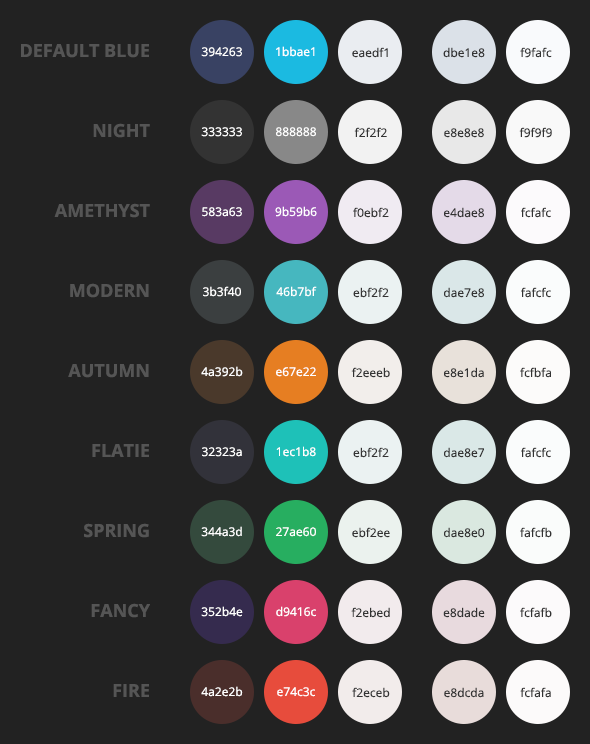
<style>
.page{position:relative;width:590px;height:744px;background:#222222}
.page>*{position:absolute;margin:0}
.t1{font:18px "OpenSans-Bold";color:#555555}
.t2{font:12px "OpenSans";color:#ffffff}
.t3{font:12px "OpenSans";color:#333333}
</style>
<div class="page">
<p class="t1" style="left:21px;top:44px;width:128px;height:14px">DEFAULT BLUE</p>
<p class="t2" style="left:201px;top:47px;width:41px;height:10px">394263</p>
<p class="t2" style="left:276px;top:46px;width:39px;height:11px">1bbae1</p>
<p class="t3" style="left:352px;top:47px;width:36px;height:11px">eaedf1</p>
<p class="t3" style="left:443px;top:47px;width:42px;height:11px">dbe1e8</p>
<p class="t3" style="left:520px;top:47px;width:32px;height:11px">f9fafc</p>
<p class="t1" style="left:93px;top:123px;width:57px;height:15px">NIGHT</p>
<p class="t2" style="left:201px;top:127px;width:41px;height:10px">333333</p>
<p class="t2" style="left:276px;top:127px;width:40px;height:10px">888888</p>
<p class="t3" style="left:354px;top:127px;width:33px;height:10px">f2f2f2</p>
<p class="t3" style="left:444px;top:128px;width:40px;height:10px">e8e8e8</p>
<p class="t3" style="left:519px;top:127px;width:33px;height:11px">f9f9f9</p>
<p class="t1" style="left:54px;top:203px;width:96px;height:15px">AMETHYST</p>
<p class="t2" style="left:202px;top:207px;width:40px;height:10px">583a63</p>
<p class="t2" style="left:275px;top:206px;width:42px;height:11px">9b59b6</p>
<p class="t3" style="left:353px;top:207px;width:36px;height:11px">f0ebf2</p>
<p class="t3" style="left:444px;top:207px;width:40px;height:11px">e4dae8</p>
<p class="t3" style="left:521px;top:207px;width:30px;height:11px">fcfafc</p>
<p class="t1" style="left:70px;top:283px;width:79px;height:15px">MODERN</p>
<p class="t2" style="left:203px;top:286px;width:38px;height:11px">3b3f40</p>
<p class="t2" style="left:276px;top:286px;width:41px;height:11px">46b7bf</p>
<p class="t3" style="left:353px;top:287px;width:36px;height:11px">ebf2f2</p>
<p class="t3" style="left:444px;top:287px;width:40px;height:11px">dae7e8</p>
<p class="t3" style="left:521px;top:287px;width:30px;height:11px">fafcfc</p>
<p class="t1" style="left:68px;top:364px;width:81px;height:14px">AUTUMN</p>
<p class="t2" style="left:201px;top:366px;width:42px;height:11px">4a392b</p>
<p class="t2" style="left:276px;top:367px;width:40px;height:10px">e67e22</p>
<p class="t3" style="left:351px;top:367px;width:39px;height:11px">f2eeeb</p>
<p class="t3" style="left:444px;top:367px;width:40px;height:11px">e8e1da</p>
<p class="t3" style="left:520px;top:367px;width:31px;height:11px">fcfbfa</p>
<p class="t1" style="left:92px;top:444px;width:57px;height:13px">FLATIE</p>
<p class="t2" style="left:202px;top:447px;width:40px;height:10px">32323a</p>
<p class="t2" style="left:276px;top:446px;width:40px;height:11px">1ec1b8</p>
<p class="t3" style="left:353px;top:447px;width:36px;height:11px">ebf2f2</p>
<p class="t3" style="left:444px;top:447px;width:40px;height:11px">dae8e7</p>
<p class="t3" style="left:521px;top:447px;width:30px;height:11px">fafcfc</p>
<p class="t1" style="left:84px;top:523px;width:65px;height:15px">SPRING</p>
<p class="t2" style="left:201px;top:526px;width:41px;height:11px">344a3d</p>
<p class="t2" style="left:276px;top:527px;width:40px;height:10px">27ae60</p>
<p class="t3" style="left:352px;top:527px;width:38px;height:11px">ebf2ee</p>
<p class="t3" style="left:444px;top:527px;width:41px;height:11px">dae8e0</p>
<p class="t3" style="left:520px;top:527px;width:32px;height:11px">fafcfb</p>
<p class="t1" style="left:91px;top:603px;width:59px;height:15px">FANCY</p>
<p class="t2" style="left:201px;top:606px;width:42px;height:11px">352b4e</p>
<p class="t2" style="left:276px;top:606px;width:40px;height:11px">d9416c</p>
<p class="t3" style="left:351px;top:607px;width:39px;height:11px">f2ebed</p>
<p class="t3" style="left:443px;top:607px;width:42px;height:11px">e8dade</p>
<p class="t3" style="left:520px;top:607px;width:32px;height:11px">fcfafb</p>
<p class="t1" style="left:113px;top:684px;width:36px;height:13px">FIRE</p>
<p class="t2" style="left:201px;top:686px;width:42px;height:11px">4a2e2b</p>
<p class="t2" style="left:277px;top:687px;width:38px;height:10px">e74c3c</p>
<p class="t3" style="left:352px;top:687px;width:38px;height:11px">f2eceb</p>
<p class="t3" style="left:444px;top:687px;width:40px;height:11px">e8dcda</p>
<p class="t3" style="left:520px;top:687px;width:31px;height:11px">fcfafa</p>
</div>
